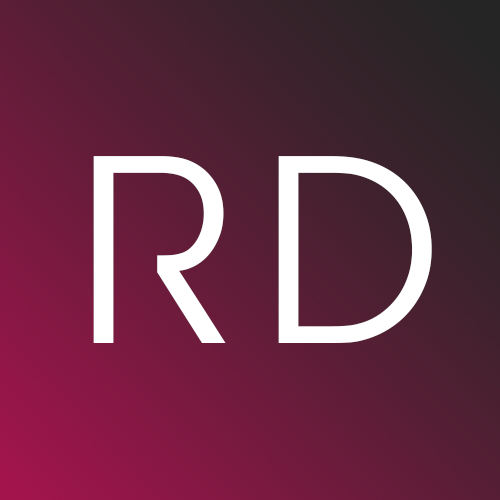
<style>
.page{position:relative;width:500px;height:500px}
.page>*{position:absolute;margin:0}
.t1{font:256px "Pasajero";letter-spacing:0.15em;color:#ffffff}
</style>
<div class="page">
<p class="t1" style="left:93px;top:156px;width:339px;height:187px">RD</p>
</div>
